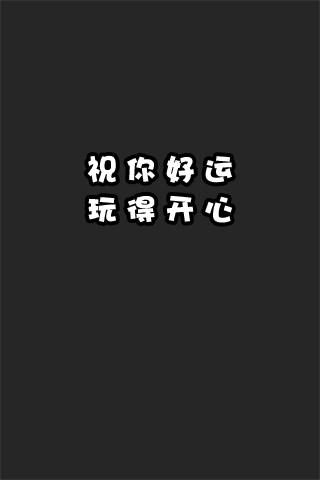
<style>
.page{position:relative;width:320px;height:480px;background:#262626}
.page>*{position:absolute;margin:0}
.t1{font:30px/40px "DFPHaiBaoW12";letter-spacing:0.3em;color:#ffffff}
</style>
<div class="page">
<p class="t1" style="left:87px;top:155px;width:145px;height:68px">祝你好运<br>玩得开心</p>
</div>
